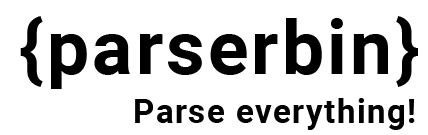
<style>
.page{position:relative;width:428px;height:135px;background:#ffffff}
.page>*{position:absolute;margin:0}
.t1{font:75px "Roboto-Bold";letter-spacing:0.04em;color:#000000}
.t2{font:33.3px "Roboto-Bold";letter-spacing:0.04em;color:#000000}
</style>
<div class="page">
<p class="t1" style="left:20px;top:16px;width:398px;height:73px">{parserbin}</p>
<p class="t2" style="left:135px;top:98px;width:280px;height:32px">Parse everything!</p>
</div>
